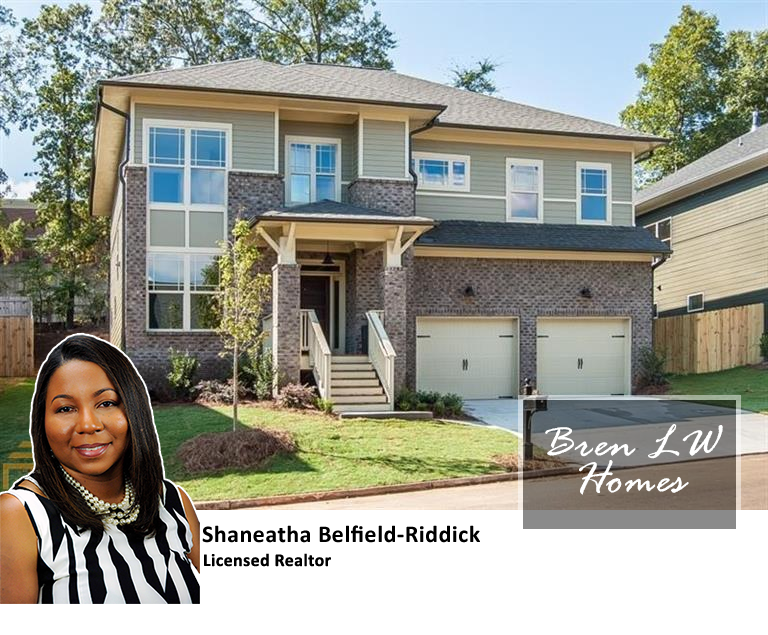
<style>
.page{position:relative;width:768px;height:635px}
.page>*{position:absolute;margin:0}
.t1{font:48px/36px "RageItalic";letter-spacing:0.02em;color:#ffffff}
.t2{font:24px "Calibri-Bold";letter-spacing:0.02em;color:#000000}
.t3{font:18px "Calibri-Bold";letter-spacing:0.02em;color:#000000}
</style>
<div class="page">
<p class="t1" style="left:545px;top:424px;width:178px;height:71px;text-align:center">Bren LW<br>Homes</p>
<p class="t2" style="left:202px;top:525px;width:278px;height:18px">Shaneatha Belfield-Riddick</p>
<p class="t3" style="left:204px;top:553px;width:127px;height:14px">Licensed Realtor</p>
</div>
